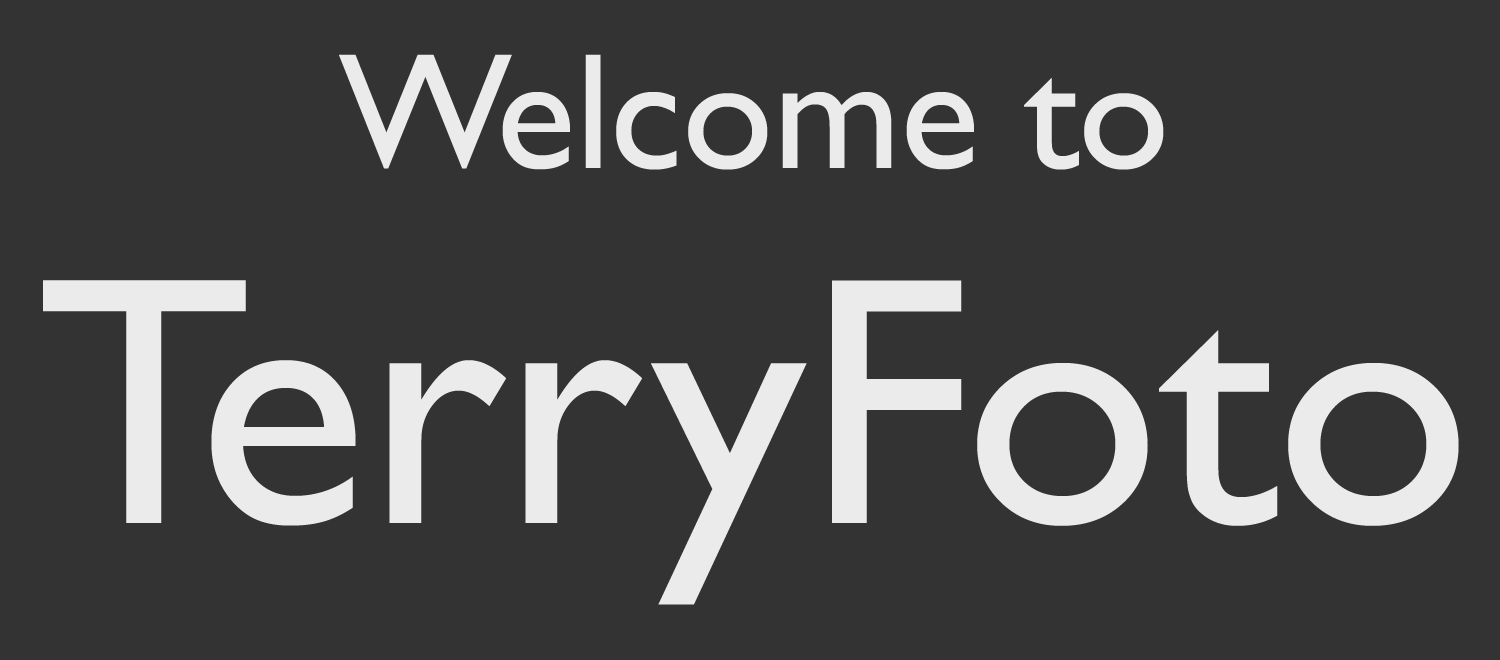
<style>
.page{position:relative;width:1500px;height:660px;background:#333333}
.page>*{position:absolute;margin:0}
.t1{font:165.9px/355.5px "GillSans";letter-spacing:-0.005em;color:#ffffff}
.t2{font:355.5px/355.5px "GillSans";letter-spacing:-0.005em;color:#ffffff}
</style>
<div class="page">
<p class="t1" style="left:43px;top:54px;width:1416px;height:551px;text-align:center;opacity:0.9">Welcome to<br><span class="t2">TerryFoto</span></p>
</div>
